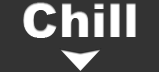
<style>
.page{position:relative;width:159px;height:72px;background:#333333}
.page>*{position:absolute;margin:0}
.t1{font:48px "Arial-Black";color:#ffffff}
</style>
<div class="page">
<p class="t1" style="left:23px;top:2px;width:113px;height:36px">Chill</p>
</div>
